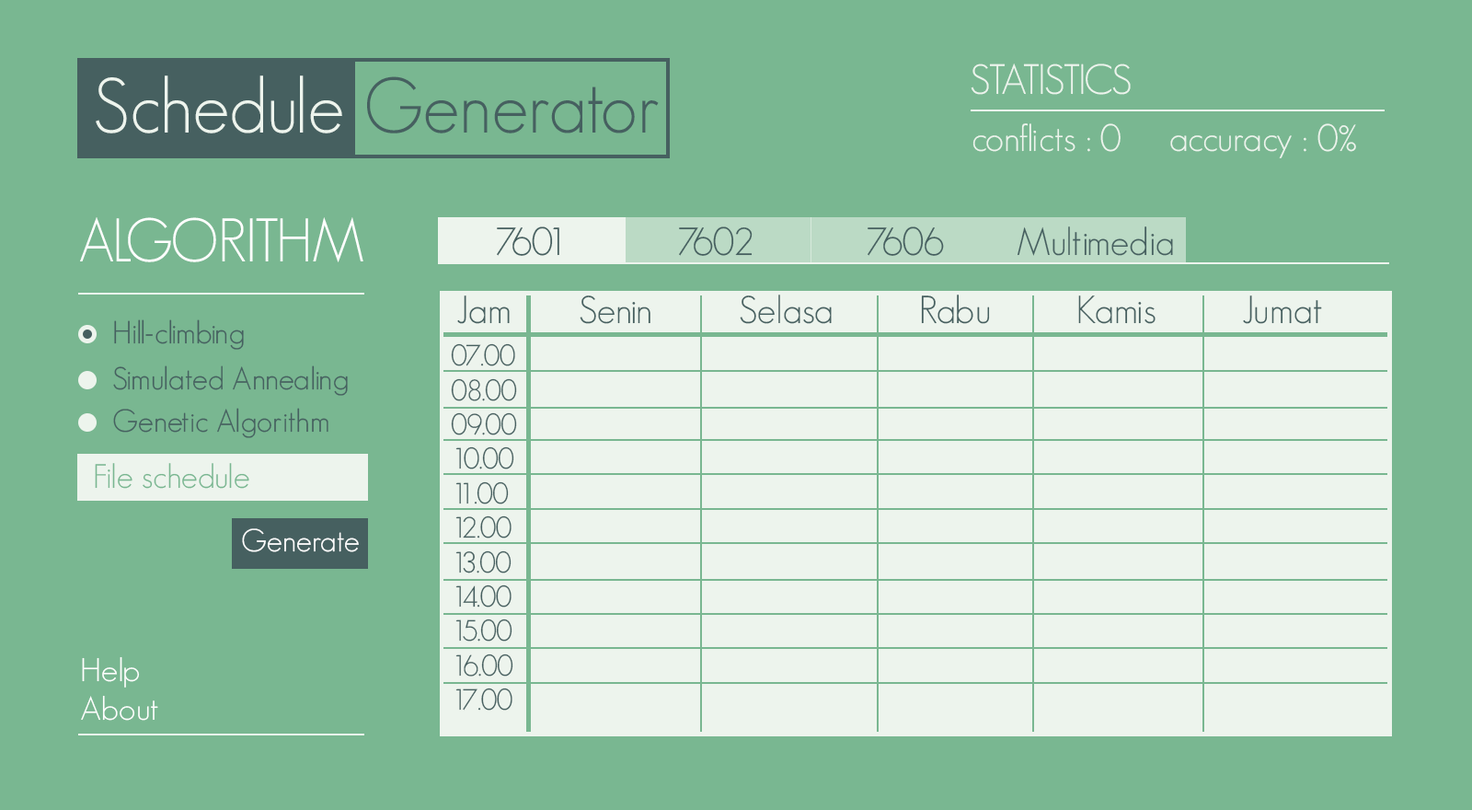
<style>
.page{position:relative;width:1472px;height:810px;background:#79b791}
.page>*{position:absolute;margin:0}
.t1{font:41.4px "GeosansLight";color:#edf4ed}
.t2{font:76.9px "GeosansLight";color:#466060;scale:0.95 1}
.t3{font:76.9px "GeosansLight";color:#edf4ed;scale:0.95 1}
.t4{font:36.8px "GeosansLight";color:#edf4ed}
.t5{font:60.2px "GeosansLight";color:#ffffff;scale:0.97 1}
.t6{font:38.2px "GeosansLight";color:#466060}
.t7{font:31.3px "GeosansLight";color:#466060}
.t8{font:28.7px "GeosansLight";color:#466060}
.t9{font:33.2px "GeosansLight";color:#79b791}
.t10{font:31.3px "GeosansLight";color:#ffffff}
.t11{font:32.2px "GeosansLight";color:#ffffff;scale:1.05 1}
</style>
<div class="page">
<p class="t1" style="left:971px;top:63px;width:160px;height:32px">STATISTICS</p>
<p class="t2" style="left:96px;top:75px;width:563px;height:58px"><span class="t3">Schedule </span>Generator</p>
<p class="t4" style="left:973px;top:123px;width:148px;height:29px">conflicts : 0</p>
<p class="t4" style="left:1171px;top:123px;width:185px;height:35px">accuracy : 0%</p>
<p class="t5" style="left:80px;top:217px;width:284px;height:45px">ALGORITHM</p>
<p class="t6" style="left:497px;top:226px;width:63px;height:30px">7601</p>
<p class="t6" style="left:679px;top:226px;width:74px;height:30px">7602</p>
<p class="t6" style="left:868px;top:226px;width:76px;height:30px">7606</p>
<p class="t6" style="left:1018px;top:226px;width:155px;height:30px">Multimedia</p>
<p class="t6" style="left:457px;top:295px;width:53px;height:29px">Jam</p>
<p class="t6" style="left:580px;top:294px;width:742px;height:30px">Senin         Selasa         Rabu         Kamis         Jumat</p>
<p class="t7" style="left:114px;top:319px;width:130px;height:31px">Hill-climbing</p>
<p class="t8" style="left:451px;top:343px;width:66px;height:367px">07.00<br>08.00<br>09.00<br>10.00<br>11.00<br>12.00<br>13.00<br>14.00<br>15.00<br>16.00<br>17.00</p>
<p class="t7" style="left:113px;top:365px;width:235px;height:31px">Simulated Annealing</p>
<p class="t7" style="left:113px;top:408px;width:216px;height:30px">Genetic Algorithm</p>
<p class="t9" style="left:95px;top:463px;width:154px;height:26px">File schedule</p>
<p class="t10" style="left:242px;top:528px;width:117px;height:24px">Generate</p>
<p class="t11" style="left:82px;top:656px;width:58px;height:31px">Help</p>
<p class="t11" style="left:81px;top:695px;width:77px;height:26px">About</p>
</div>
